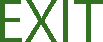
<style>
.page{position:relative;width:103px;height:42px;background:#ffffff}
.page>*{position:absolute;margin:0}
.t1{font:60px "Leelawadee";color:#347122;scale:0.96 1}
</style>
<div class="page">
<p class="t1" style="left:0px;top:0px;width:103px;height:42px">EXIT</p>
</div>
